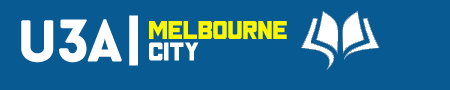
<style>
.page{position:relative;width:450px;height:90px;background:#085a93}
.page>*{position:absolute;margin:0}
.t1{font:60px "CopperplateGothic-Bold";color:#ffffff}
.t2{font:60px "BaronNeueBlack";color:#ffffff}
.t3{font:18px "Timeline";color:#fef500}
.t4{font:18px "Timeline";color:#ffffff}
</style>
<div class="page">
<p class="t1" style="left:129px;top:15px;width:9px;height:51px">|</p>
<p class="t2" style="left:21px;top:19px;width:101px;height:44px">u3a</p>
<p class="t3" style="left:149px;top:21px;width:138px;height:40px">Melbourne<br><span class="t4">City</span></p>
</div>
